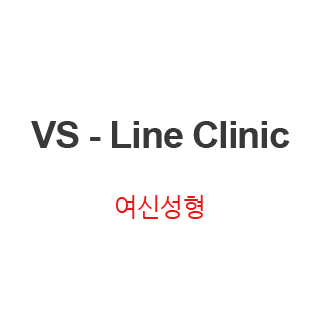
<style>
.page{position:relative;width:320px;height:320px;background:#ffffff}
.page>*{position:absolute;margin:0}
.t1{font:37.5px/33.3px "Arial-BoldMT";letter-spacing:-0.025em;color:#37393a}
.t2{font:37.5px/41.7px "Arial-BoldMT";letter-spacing:-0.025em;color:#37393a}
.t3{font:25px/33.3px "NanumGothic";letter-spacing:-0.025em;color:#ee1414}
</style>
<div class="page">
<p class="t1" style="left:31px;top:121px;width:259px;height:98px;text-align:center"><span class="t2">VS </span>- Line Clinic<br><br><span class="t3">여신성형</span></p>
</div>
